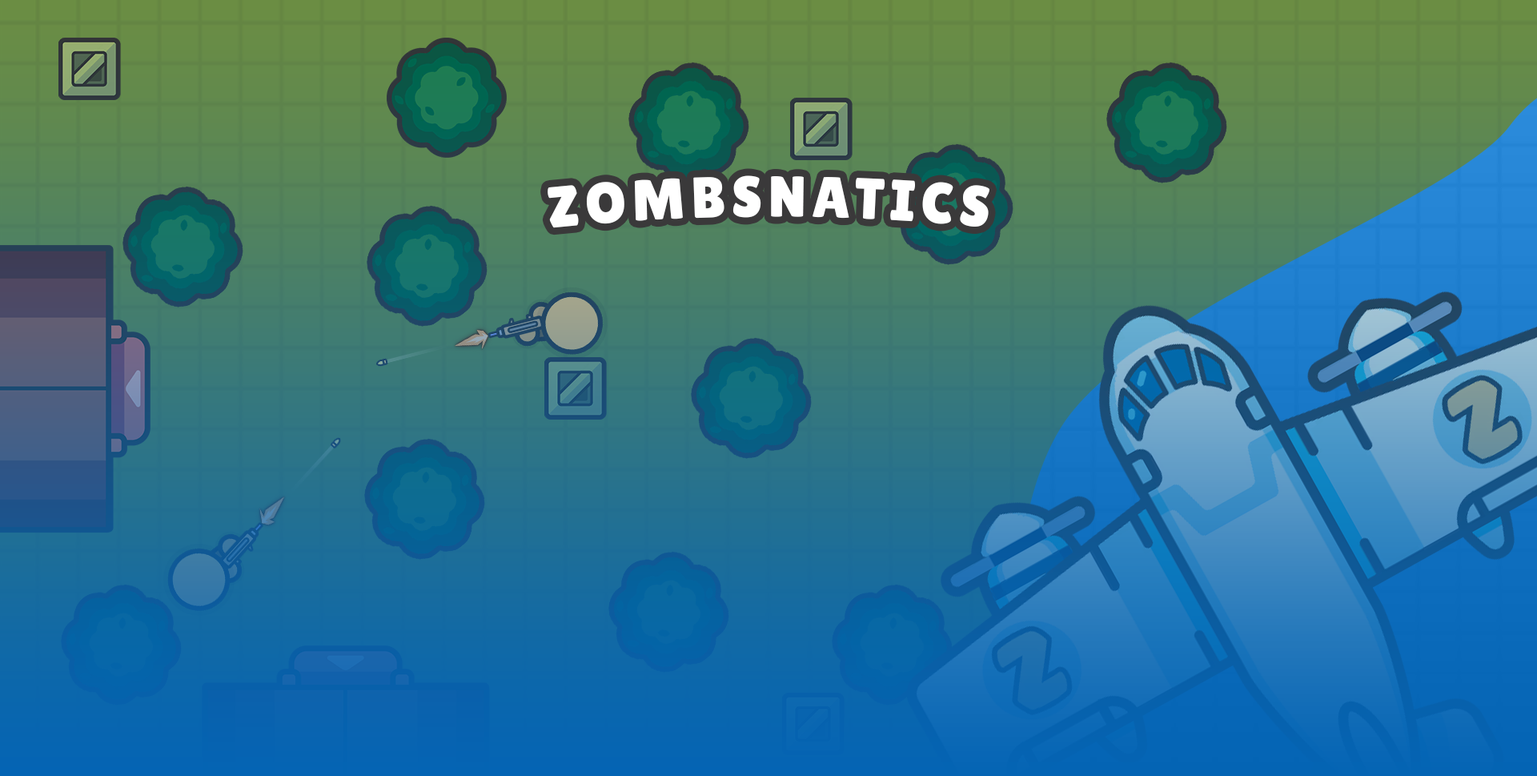
<style>
.page{position:relative;width:1537px;height:776px}
.page>*{position:absolute;margin:0}
.t1{font:57.6px "LilitaOne";letter-spacing:0.1em;color:#ffffff}
</style>
<div class="page">
<p class="t1" style="left:548px;top:175px;width:442px;height:53px">ZOMBSNATICS</p>
</div>
